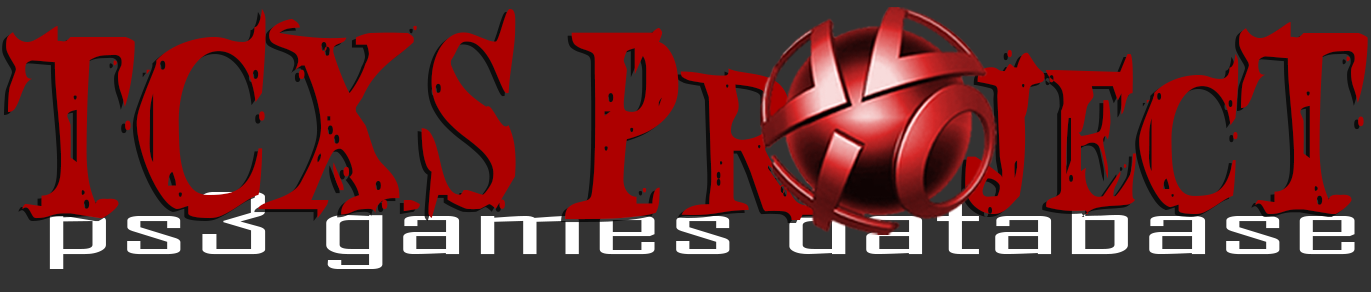
<style>
.page{position:relative;width:1371px;height:292px;background:#333333}
.page>*{position:absolute;margin:0}
.t1{font:296.6px "BloodCrow";color:#ad0000;scale:0.69 1}
.t2{font:81.2px "AgencyFB-Reg";color:#ffffff;scale:2.52 1}
</style>
<div class="page">
<p class="t1" style="left:6px;top:9px;width:814px;height:211px">TCXS Pr</p>
<p class="t1" style="left:965px;top:22px;width:403px;height:192px">jecT</p>
<p class="t2" style="left:49px;top:192px;width:1306px;height:77px">ps3 games database</p>
</div>
